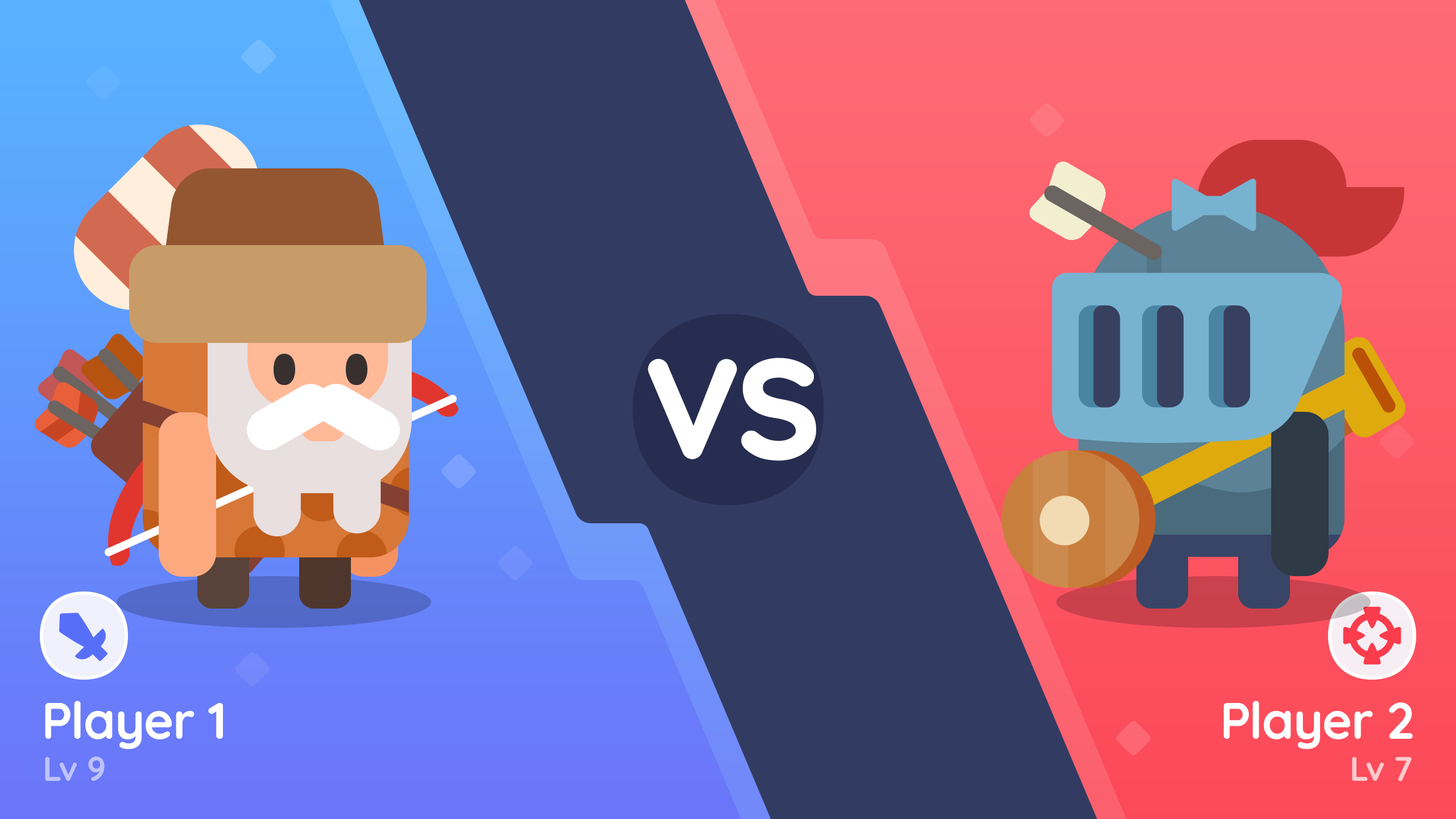
<style>
.page{position:relative;width:1456px;height:819px;background:#323b62}
.page>*{position:absolute;margin:0}
.t1{font:137.1px "Quicksand-Bold";color:#ffffff;font-weight:bold}
.t2{font:51.2px "Quicksand-Bold";letter-spacing:-0.01em;color:#ffffff}
.t3{font:34.1px "Quicksand-Bold";letter-spacing:-0.01em;color:#bec2ff}
.t4{font:34.1px "Quicksand-Bold";letter-spacing:-0.01em;color:#ffcacd}
</style>
<div class="page">
<p class="t1" style="left:648px;top:358px;width:168px;height:103px">VS</p>
<p class="t2" style="left:45px;top:701px;width:178px;height:48px">Player 1</p>
<p class="t2" style="left:1223px;top:701px;width:190px;height:48px">Player 2</p>
<p class="t3" style="left:45px;top:756px;width:60px;height:25px">Lv 9</p>
<p class="t4" style="left:1352px;top:757px;width:60px;height:24px">Lv 7</p>
</div>
